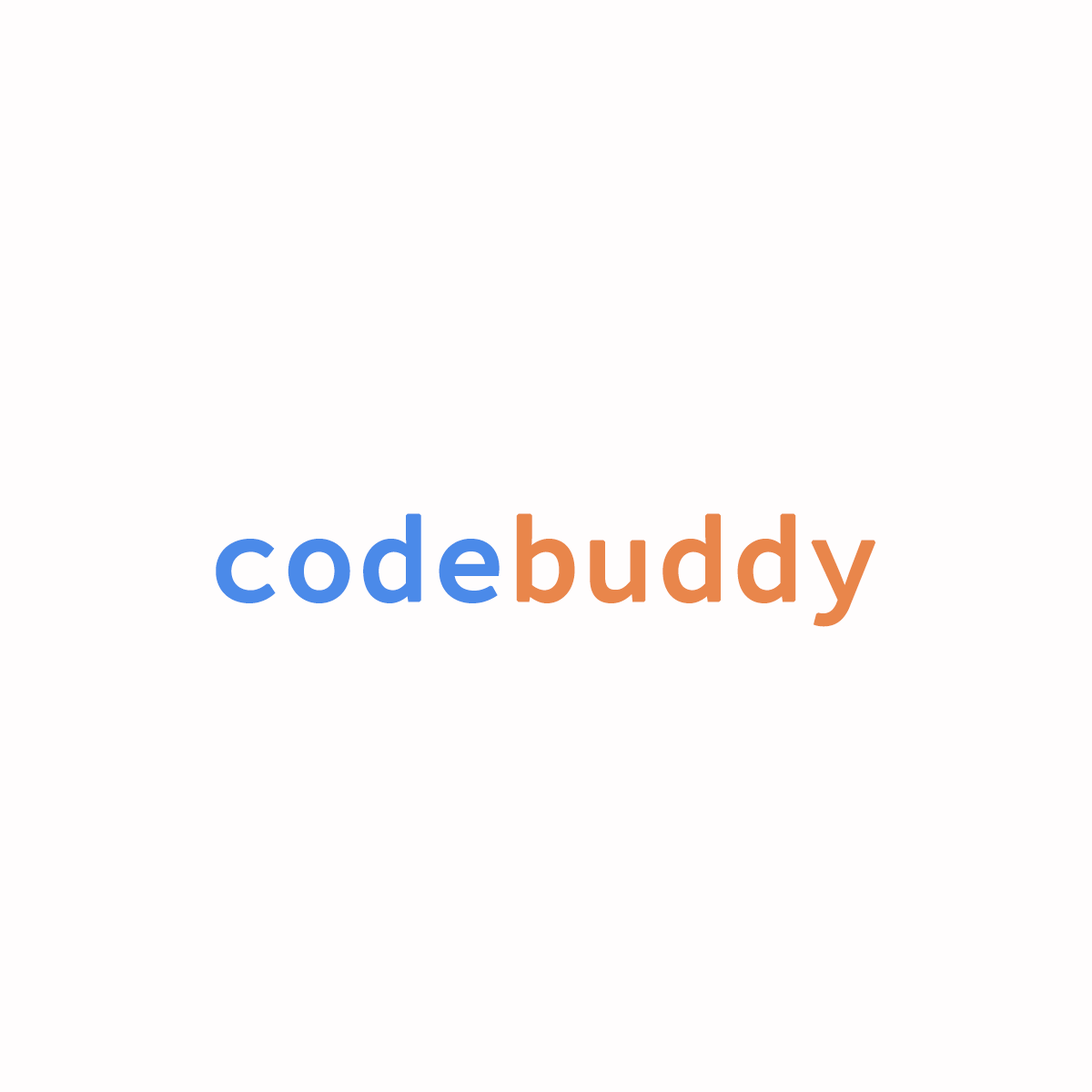
<style>
.page{position:relative;width:1092px;height:1092px;background:#fffdfd}
.page>*{position:absolute;margin:0}
.t1{font:119.4px "SourceCodePro-Medium";color:#e9864b;font-weight:bold}
.t2{font:119.4px "SourceCodePro-Medium";color:#4b8ae9;font-weight:bold}
</style>
<div class="page">
<p class="t1" style="left:216px;top:513px;width:660px;height:114px"><span class="t2">code</span>buddy</p>
</div>
